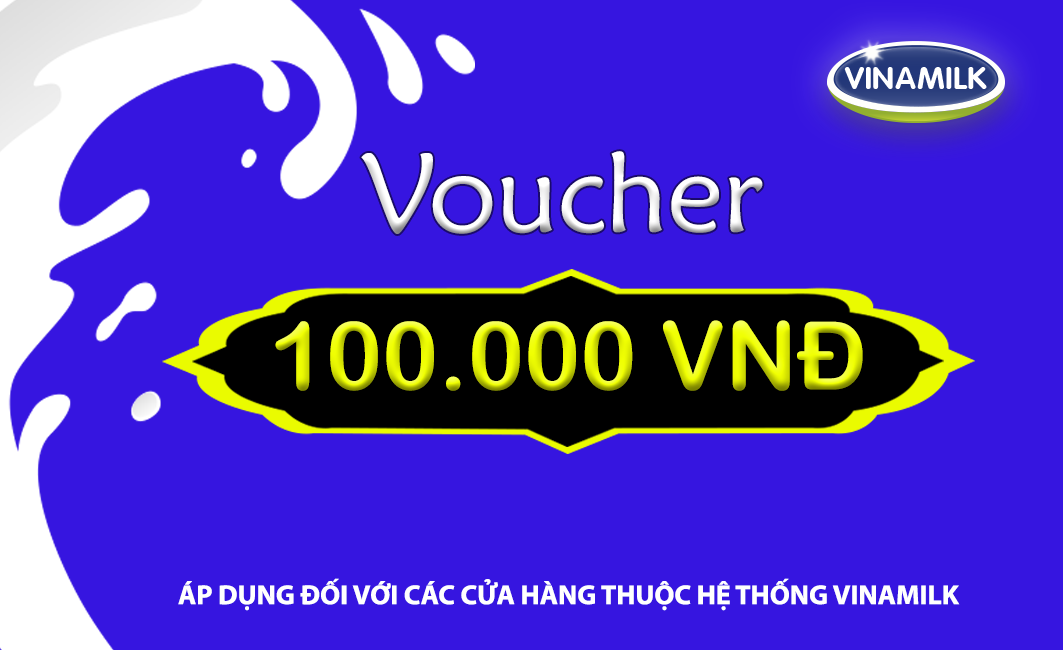
<style>
.page{position:relative;width:1063px;height:650px;background:#3615e0}
.page>*{position:absolute;margin:0}
.t1{font:112.5px "MaiandraGD-Regular";color:#ffffff}
.t2{font:22.7px "ArialRoundedMTBold"}
.t3{font:27.5px "MyriadPro-Bold";color:#ffffff}
</style>
<div class="page">
<p class="t1" style="left:361px;top:151px;width:402px;height:83px">Voucher</p>
<p class="t2" style="left:275px;top:320px;width:588px;height:71px;text-align:center">100.000 VNÐ</p>
<p class="t3" style="left:178px;top:578px;width:782px;height:33px">ÁP DỤNG ĐỐI VỚI CÁC CỬA HÀNG THUỘC HỆ THỐNG VINAMILK</p>
</div>
